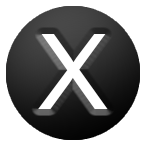
<style>
.page{position:relative;width:146px;height:146px;background:#ffffff}
.page>*{position:absolute;margin:0}
.t1{font:104.8px "ArialMT";color:#ffffff}
</style>
<div class="page">
<p class="t1" style="left:38px;top:34px;width:70px;height:75px">X</p>
</div>
